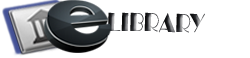
<style>
.page{position:relative;width:250px;height:58px;background:#ffffff}
.page>*{position:absolute;margin:0}
.t1{font:27.2px "Broadway";scale:0.75 1}
</style>
<div class="page">
<p class="t1" style="left:108px;top:12px;width:97px;height:21px;rotate:1deg">LIBRARY</p>
</div>
